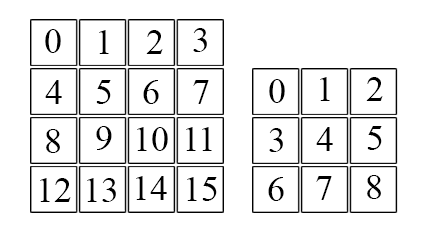
<style>
.page{position:relative;width:425px;height:227px;background:#ffffff}
.page>*{position:absolute;margin:0}
.t1{font:36px "TimesNewRomanPSMT";color:#000000}
</style>
<div class="page">
<p class="t1" style="left:45px;top:29px;width:16px;height:24px">0</p>
<p class="t1" style="left:99px;top:30px;width:10px;height:24px">1</p>
<p class="t1" style="left:146px;top:30px;width:17px;height:24px">2</p>
<p class="t1" style="left:193px;top:28px;width:14px;height:24px">3</p>
<p class="t1" style="left:320px;top:77px;width:10px;height:24px">1</p>
<p class="t1" style="left:366px;top:77px;width:17px;height:24px">2</p>
<p class="t1" style="left:45px;top:80px;width:17px;height:24px">4</p>
<p class="t1" style="left:96px;top:80px;width:15px;height:24px">5</p>
<p class="t1" style="left:143px;top:80px;width:16px;height:24px">6</p>
<p class="t1" style="left:193px;top:80px;width:16px;height:24px">7</p>
<p class="t1" style="left:269px;top:79px;width:16px;height:24px">0</p>
<p class="t1" style="left:96px;top:126px;width:16px;height:24px">9</p>
<p class="t1" style="left:367px;top:126px;width:15px;height:24px">5</p>
<p class="t1" style="left:46px;top:129px;width:14px;height:24px">8</p>
<p class="t1" style="left:137px;top:127px;width:31px;height:24px">10</p>
<p class="t1" style="left:186px;top:127px;width:26px;height:24px">11</p>
<p class="t1" style="left:269px;top:128px;width:14px;height:24px">3</p>
<p class="t1" style="left:316px;top:127px;width:17px;height:24px">4</p>
<p class="t1" style="left:40px;top:178px;width:31px;height:24px">12</p>
<p class="t1" style="left:87px;top:178px;width:29px;height:24px">13</p>
<p class="t1" style="left:136px;top:176px;width:31px;height:24px">14</p>
<p class="t1" style="left:187px;top:177px;width:30px;height:24px">15</p>
<p class="t1" style="left:268px;top:177px;width:16px;height:24px">6</p>
<p class="t1" style="left:316px;top:176px;width:16px;height:24px">7</p>
<p class="t1" style="left:367px;top:175px;width:14px;height:24px">8</p>
</div>
